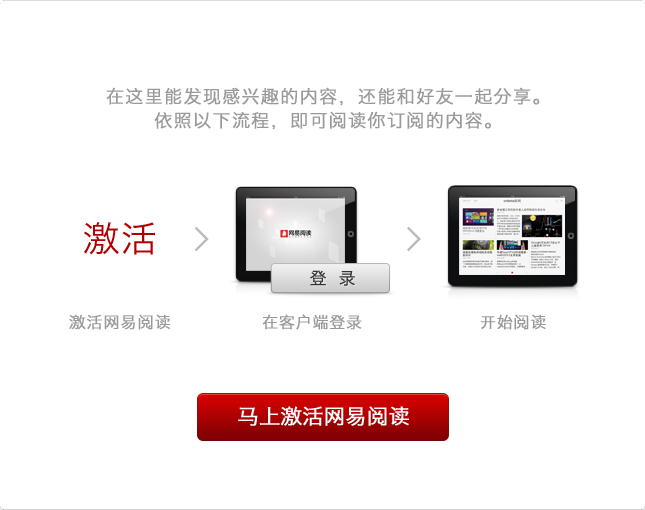
<style>
.page{position:relative;width:645px;height:510px;background:#ffffff}
.page>*{position:absolute;margin:0}
.t1{font:18px/24px "HiraginoSansGB-W3";letter-spacing:0.05em;color:#999999;font-weight:bold}
.t2{font:36px "HiraginoSansGB-W3";letter-spacing:0.05em;color:#ad0102}
.t3{font:16.9px "HiraginoSansGB-W3";letter-spacing:0.02em;color:#333333}
.t4{font:16px "HiraginoSansGB-W3";letter-spacing:0.04em;color:#999999;font-weight:bold}
.t5{font:16px "HiraginoSansGB-W3";letter-spacing:0.02em;color:#999999;font-weight:bold}
.t6{font:21px "HiraginoSansGB-W3";color:#ffffff;font-weight:bold}
</style>
<div class="page">
<p class="t1" style="left:106px;top:87px;width:434px;height:43px;text-align:center">在这里能发现感兴趣的内容，还能和好友一起分享。<br>依照以下流程，即可阅读你订阅的内容。</p>
<p class="t2" style="left:84px;top:222px;width:71px;height:33px">激活</p>
<p class="t3" style="left:310px;top:270px;width:45px;height:16px">登  录</p>
<p class="t4" style="left:69px;top:314px;width:102px;height:16px">激活网易阅读</p>
<p class="t5" style="left:262px;top:314px;width:100px;height:16px">在客户端登录</p>
<p class="t5" style="left:481px;top:314px;width:65px;height:16px">开始阅读</p>
<p class="t6" style="left:238px;top:406px;width:171px;height:20px">马上激活网易阅读</p>
</div>
